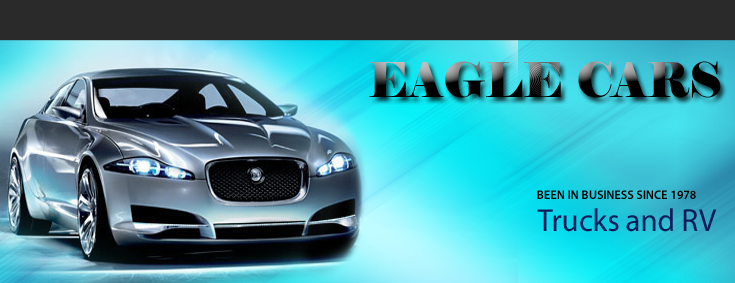
<style>
.page{position:relative;width:735px;height:283px}
.page>*{position:absolute;margin:0}
.t1{font:48px "Elephant-Regular";scale:0.97 1}
.t2{font:12.4px "MyriadPro-Semibold";color:#000000;text-transform:uppercase;scale:0.97 1}
.t3{font:32px "MyriadPro-Regular";color:#0c1d5b;scale:0.97 1}
</style>
<div class="page">
<p class="t1" style="left:369px;top:61px;width:352px;height:37px">EAGLE CARS</p>
<p class="t2" style="left:537px;top:190px;width:159px;height:9px">been in business since 1978</p>
<p class="t3" style="left:537px;top:208px;width:180px;height:24px">Trucks and RV</p>
</div>
